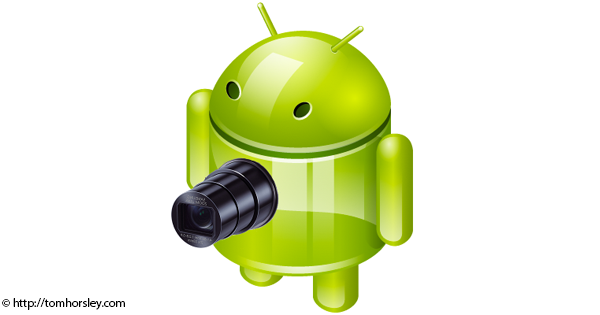
<style>
.page{position:relative;width:600px;height:315px;background:#ffffff}
.page>*{position:absolute;margin:0}
.t1{font:12px "MyriadPro-Regular";color:#000000}
</style>
<div class="page">
<p class="t1" style="left:2px;top:298px;width:123px;height:12px">© http://tomhorsley.com</p>
</div>
